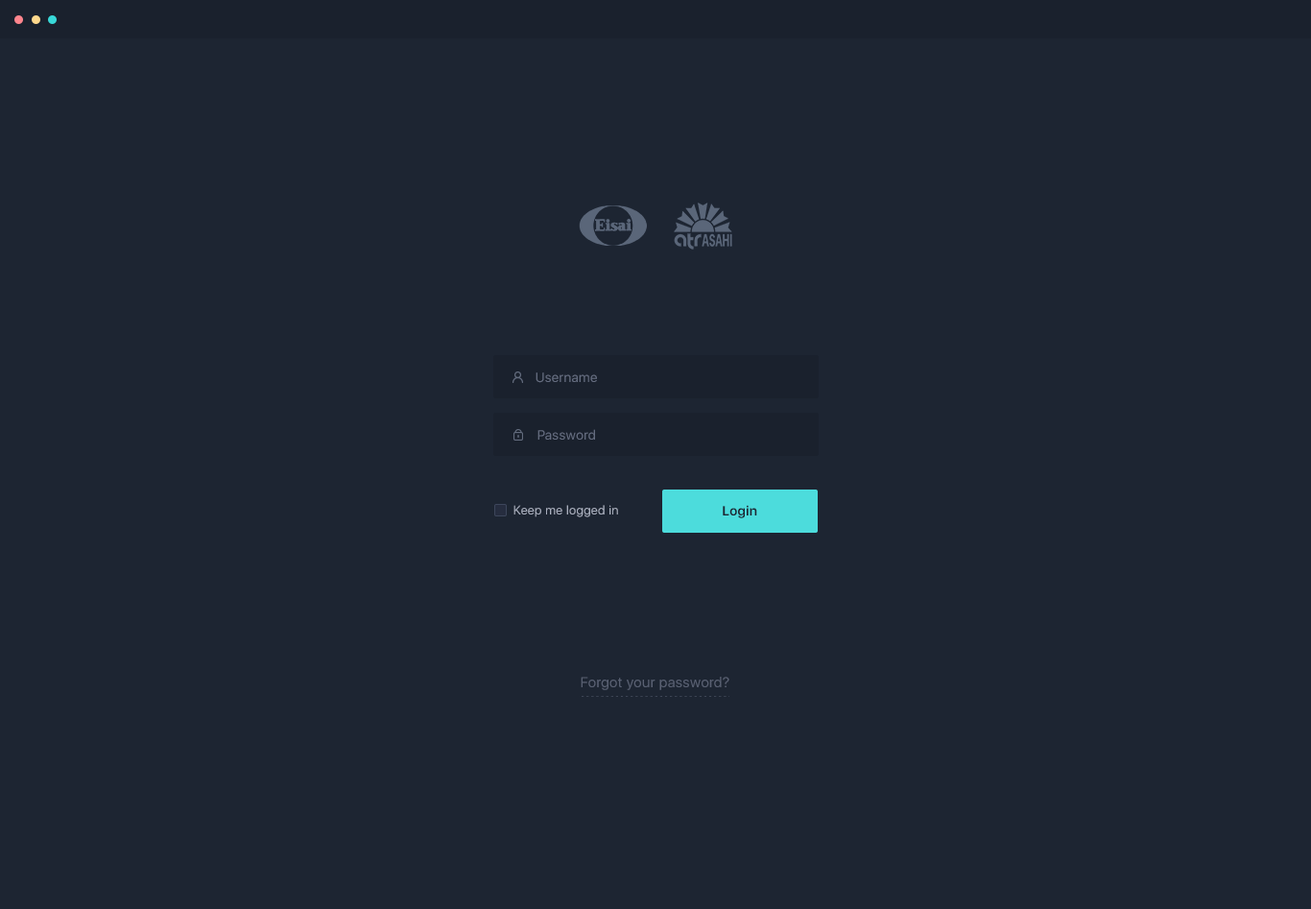
<style>
.page{position:relative;width:1311px;height:909px;background:#1d2532}
.page>*{position:absolute;margin:0}
.t1{font:13.4px "SFUIDisplay-Regular";letter-spacing:0.025em;color:#646c7f}
.t2{font:12.5px "SFUIDisplay-Regular";letter-spacing:0.025em;color:#a8aebd}
.t3{font:13.4px "SFUIDisplay-Semibold";letter-spacing:0.025em;color:#1d2532}
.t4{font:14.4px "SFUIDisplay-Regular";letter-spacing:0.025em;color:#646c7f}
</style>
<div class="page">
<p class="t1" style="left:536px;top:373px;width:61px;height:10px">Username</p>
<p class="t1" style="left:538px;top:429px;width:57px;height:11px">Password</p>
<p class="t2" style="left:514px;top:505px;width:104px;height:12px">Keep me logged in</p>
<p class="t3" style="left:723px;top:505px;width:35px;height:13px">Login</p>
<p class="t4" style="left:581px;top:677px;width:149px;height:13px;opacity:0.8">Forgot your password?</p>
</div>
